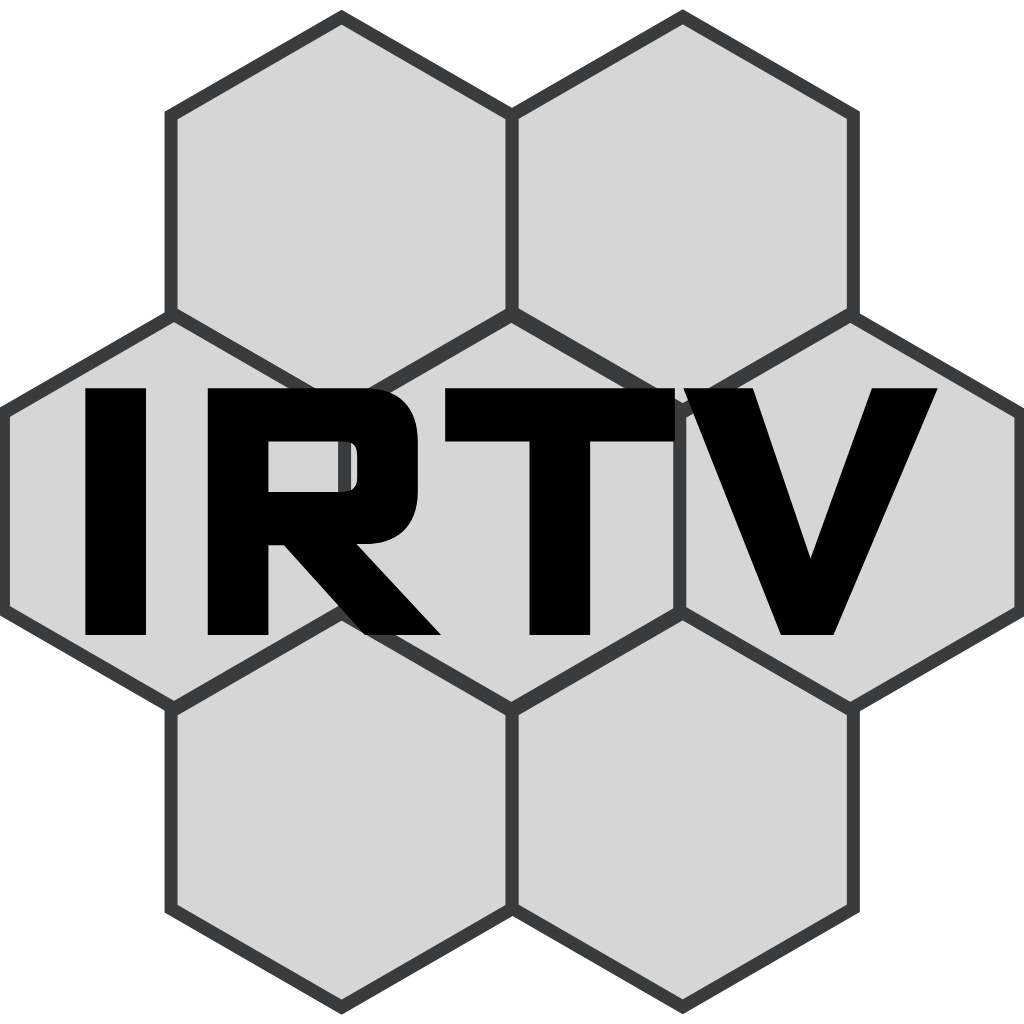
<style>
.page{position:relative;width:1024px;height:1024px;background:#d6d6d6}
.page>*{position:absolute;margin:0}
.t1{font:369.8px "BankSansEFCY-BolCon";color:#000000}
</style>
<div class="page">
<p class="t1" style="left:85px;top:388px;width:853px;height:247px">IRTV</p>
</div>
